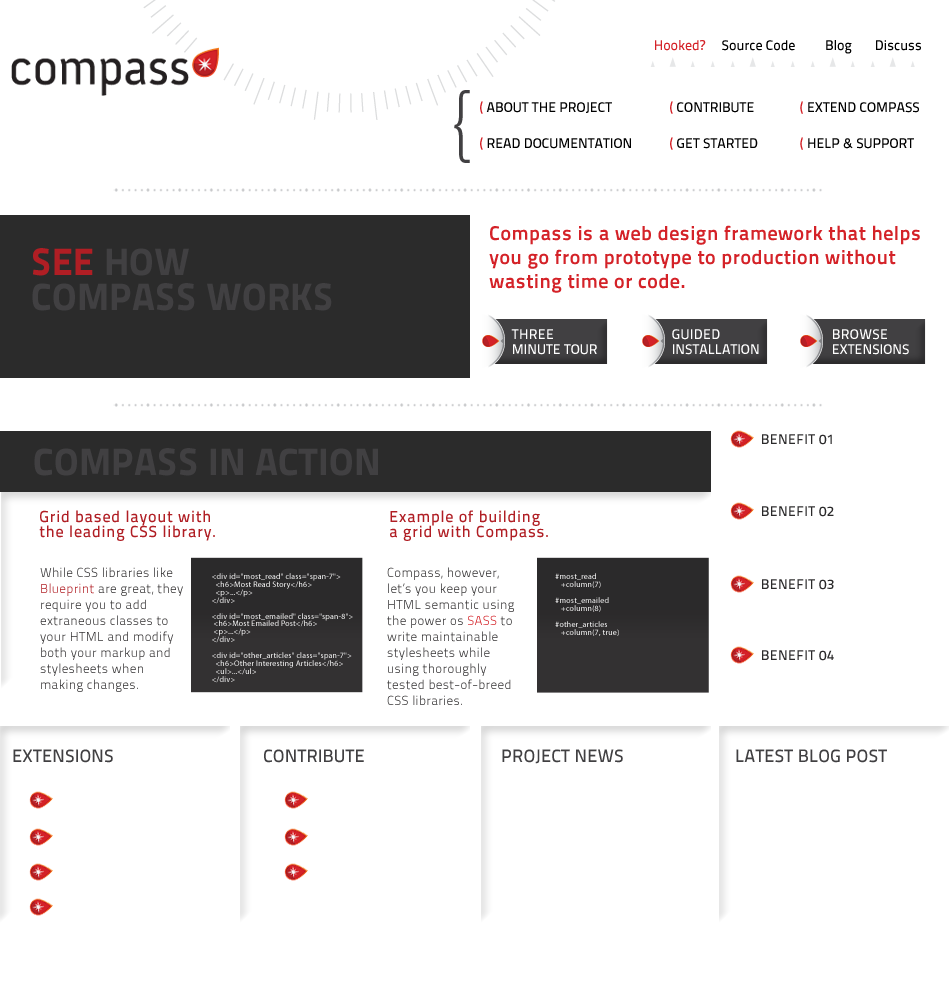
<style>
.page{position:relative;width:950px;height:1008px;background:#ffffff}
.page>*{position:absolute;margin:0}
.t1{font:14px "TitilliumText14L-600wt";color:#000000}
.t2{font:14px "TitilliumText14L-600wt";color:#d42228}
.t3{font:71.5px "Caecilia-Light";color:#414042}
.t4{font:14px/36px "TitilliumText14L-600wt";color:#000000}
.t5{font:14px/36px "TitilliumText14L-600wt";color:#d42228}
.t6{font:20px/24px "TitilliumText14L-800wt";letter-spacing:0.025em;color:#d42228}
.t7{font:38px/35px "TitilliumText14L-999wt";letter-spacing:0.01em;color:#414042}
.t8{font:38px/35px "TitilliumText14L-999wt";letter-spacing:0.01em;color:#b01e24}
.t9{font:14px/15px "TitilliumText14L-600wt";color:#ffffff}
.t10{font:14px/15px "TitilliumText14L-600wt";letter-spacing:0.025em;color:#ffffff}
.t11{font:14px "TitilliumText14L-600wt";letter-spacing:0.025em;color:#2b2a2b}
.t12{font:38px "TitilliumText14L-999wt";letter-spacing:0.01em;color:#414042}
.t13{font:16px/15px "TitilliumText14L-600wt";letter-spacing:0.05em;color:#b01e24}
.t14{font:13px/16px "TitilliumText14L-250wt";letter-spacing:0.025em;color:#333132}
.t15{font:13px/16px "TitilliumText14L-250wt";letter-spacing:0.025em;color:#b01e24}
.t16{font:13px/16px "TitilliumText14L-250wt";letter-spacing:0.025em}
.t17{font:7.9px/7.9px "MyriadPro-Regular";letter-spacing:0.025em}
.t18{font:18px "TitilliumText14L-600wt";letter-spacing:0.01em;color:#414042}
</style>
<div class="page">
<p class="t1" style="left:655px;top:40px;width:266px;height:14px"><span class="t2">Hooked?</span>     Source Code         Blog       Discuss</p>
<p class="t3" style="left:454px;top:90px;width:16px;height:73px">{</p>
<p class="t4" style="left:480px;top:101px;width:151px;height:49px"><span class="t5">( </span>ABOUT THE PROJECT<br><span class="t5">( </span>READ DOCUMENTATION</p>
<p class="t4" style="left:670px;top:101px;width:88px;height:49px"><span class="t5">( </span>CONTRIBUTE<br><span class="t5">( </span>GET STARTED</p>
<p class="t4" style="left:800px;top:101px;width:119px;height:49px"><span class="t5">( </span>EXTEND COMPASS<br><span class="t5">( </span>HELP &amp; SUPPORT</p>
<p class="t6" style="left:489px;top:225px;width:431px;height:68px">Compass is a web design framework that helps<br>you go from prototype to production without <br>wasting time or code.</p>
<p class="t7" style="left:32px;top:248px;width:300px;height:63px"><span class="t8">SEE</span> HOW<br>COMPASS WORKS</p>
<p class="t9" style="left:511px;top:329px;width:86px;height:26px"><span class="t10">THREE<br></span>MINUTE TOUR</p>
<p class="t9" style="left:672px;top:329px;width:87px;height:26px"><span class="t10">GUIDED<br></span>INSTALLATION</p>
<p class="t9" style="left:833px;top:329px;width:76px;height:26px"><span class="t10">BROWSE<br></span>EXTENSIONS</p>
<p class="t11" style="left:762px;top:434px;width:70px;height:11px">BENEFIT 01</p>
<p class="t12" style="left:34px;top:448px;width:344px;height:28px">COMPASS IN ACTION</p>
<p class="t13" style="left:39px;top:510px;width:176px;height:31px">Grid based layout with <br>the leading CSS library.</p>
<p class="t13" style="left:390px;top:510px;width:158px;height:31px">Example of building <br>a grid with Compass.</p>
<p class="t11" style="left:762px;top:506px;width:72px;height:11px">BENEFIT 02</p>
<p class="t14" style="left:40px;top:567px;width:143px;height:125px">While CSS libraries like <span class="t15">Blueprint</span> are great, they require you to add <br>extraneous classes to <br>your HTML and modify both your markup and stylesheets when <br>making changes.</p>
<p class="t16" style="left:387px;top:567px;width:127px;height:138px">Compass, however, <br>let’s you keep your <br>HTML semantic using the power os SASS to <br>write maintainable stylesheets while <br>using thoroughly  <br>tested best-of-breed <br>CSS libraries.</p>
<p class="t17" style="left:212px;top:573px;width:141px;height:110px">&lt;div id="most_read" class="span-7"&gt;<br>  &lt;h6&gt;Most Read Story&lt;/h6&gt;<br>  &lt;p&gt;...&lt;/p&gt;<br>&lt;/div&gt;<br><br>&lt;div id="most_emailed" class="span-8"&gt;<br> &lt;h6&gt;Most Emailed Post&lt;/h6&gt;<br> &lt;p&gt;...&lt;/p&gt;<br>&lt;/div&gt;<br><br>&lt;div id="other_articles" class="span-7"&gt;<br>  &lt;h6&gt;Other Interesting Articles&lt;/h6&gt;<br>  &lt;ul&gt;...&lt;/ul&gt;<br>&lt;/div&gt;</p>
<p class="t17" style="left:555px;top:573px;width:64px;height:63px">#most_read<br>   +column(7)<br><br>#most_emailed<br>   +column(8)<br><br>#other_articles<br>   +column(7, true)</p>
<p class="t11" style="left:762px;top:579px;width:72px;height:11px">BENEFIT 03</p>
<p class="t11" style="left:762px;top:650px;width:72px;height:11px">BENEFIT 04</p>
<p class="t18" style="left:13px;top:749px;width:100px;height:14px">EXTENSIONS</p>
<p class="t18" style="left:264px;top:749px;width:100px;height:14px">CONTRIBUTE</p>
<p class="t18" style="left:502px;top:749px;width:121px;height:15px">PROJECT NEWS</p>
<p class="t18" style="left:736px;top:749px;width:151px;height:14px">LATEST BLOG POST</p>
</div>
